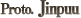
<style>
.page{position:relative;width:81px;height:18px;background:#ffffff}
.page>*{position:absolute;margin:0}
.t1{font:14px "RyuminPro-ExBold";letter-spacing:-0.08em;color:#4a3f32;font-weight:bold;scale:0.9 1}
.t2{font:18px "RyuminPro-ExBold";letter-spacing:-0.08em;color:#4a3f32;font-weight:bold;scale:0.9 1}
.t3{font:16px "RyuminPro-ExBold";letter-spacing:-0.08em;color:#4a3f32;font-weight:bold;scale:0.9 1}
</style>
<div class="page">
<p class="t1" style="left:0px;top:0px;width:80px;height:18px">Proto.<span class="t2"> J</span><span class="t3">inpuu</span></p>
</div>
